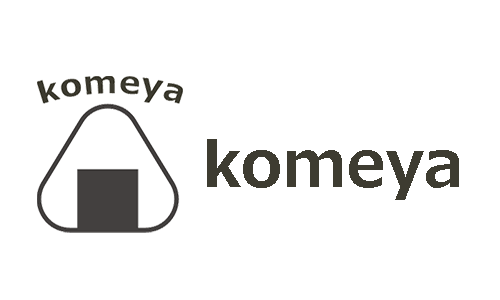
<style>
.page{position:relative;width:500px;height:300px;background:#ffffff}
.page>*{position:absolute;margin:0}
.t1{font:63px "Meiryo-Bold";color:#3e3c31}
</style>
<div class="page">
<p class="t1" style="left:207px;top:139px;width:252px;height:61px">komeya</p>
</div>
